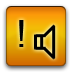
<style>
.page{position:relative;width:72px;height:72px}
.page>*{position:absolute;margin:0}
.t1{font:38px "ArialMT";color:#000000}
</style>
<div class="page">
<p class="t1" style="left:19px;top:20px;width:5px;height:27px">!</p>
</div>
